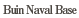
<style>
.page{position:relative;width:79px;height:18px;background:#ffffff}
.page>*{position:absolute;margin:0}
.t1{font:12px "RyuminPro-ExBold";letter-spacing:-0.08em;color:#4c4843;scale:0.9 1}
</style>
<div class="page">
<p class="t1" style="left:3px;top:5px;width:74px;height:10px">Buin Naval Base</p>
</div>
